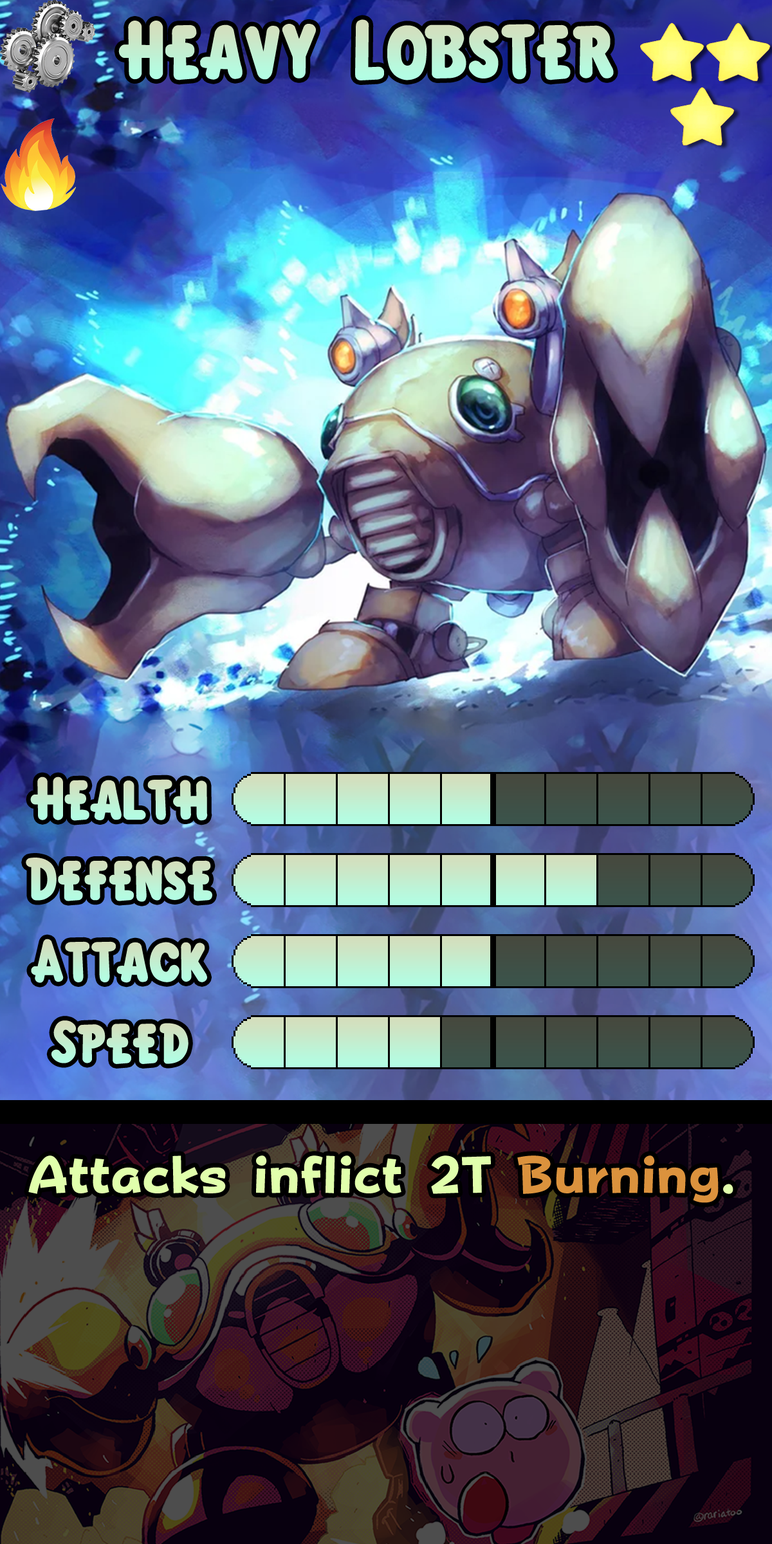
<style>
.page{position:relative;width:772px;height:1544px}
.page>*{position:absolute;margin:0}
.t1{font:126.1px "KirbyClassic";color:#c3eed0}
.t2{font:92.7px "KirbyClassic";color:#c2efd1}
.t3{font:92.7px "KirbyClassic";color:#c4edcf}
.t4{font:88.8px "FOTPopHappinessStrp-ExtraBold";color:#e1ffac}
.t5{font:88.8px "FOTPopHappinessStrp-ExtraBold";color:#db923d}
</style>
<div class="page">
<p class="t1" style="left:118px;top:19px;width:496px;height:61px">Heavy Lobster</p>
<p class="t2" style="left:30px;top:777px;width:178px;height:44px">Health</p>
<p class="t3" style="left:26px;top:858px;width:186px;height:44px">Defense</p>
<p class="t2" style="left:31px;top:939px;width:176px;height:44px">Attack</p>
<p class="t3" style="left:51px;top:1021px;width:138px;height:43px">Speed</p>
<p class="t4" style="left:28px;top:1156px;width:706px;height:47px">Attacks inflict 2T <span class="t5">Burning</span>.</p>
</div>
